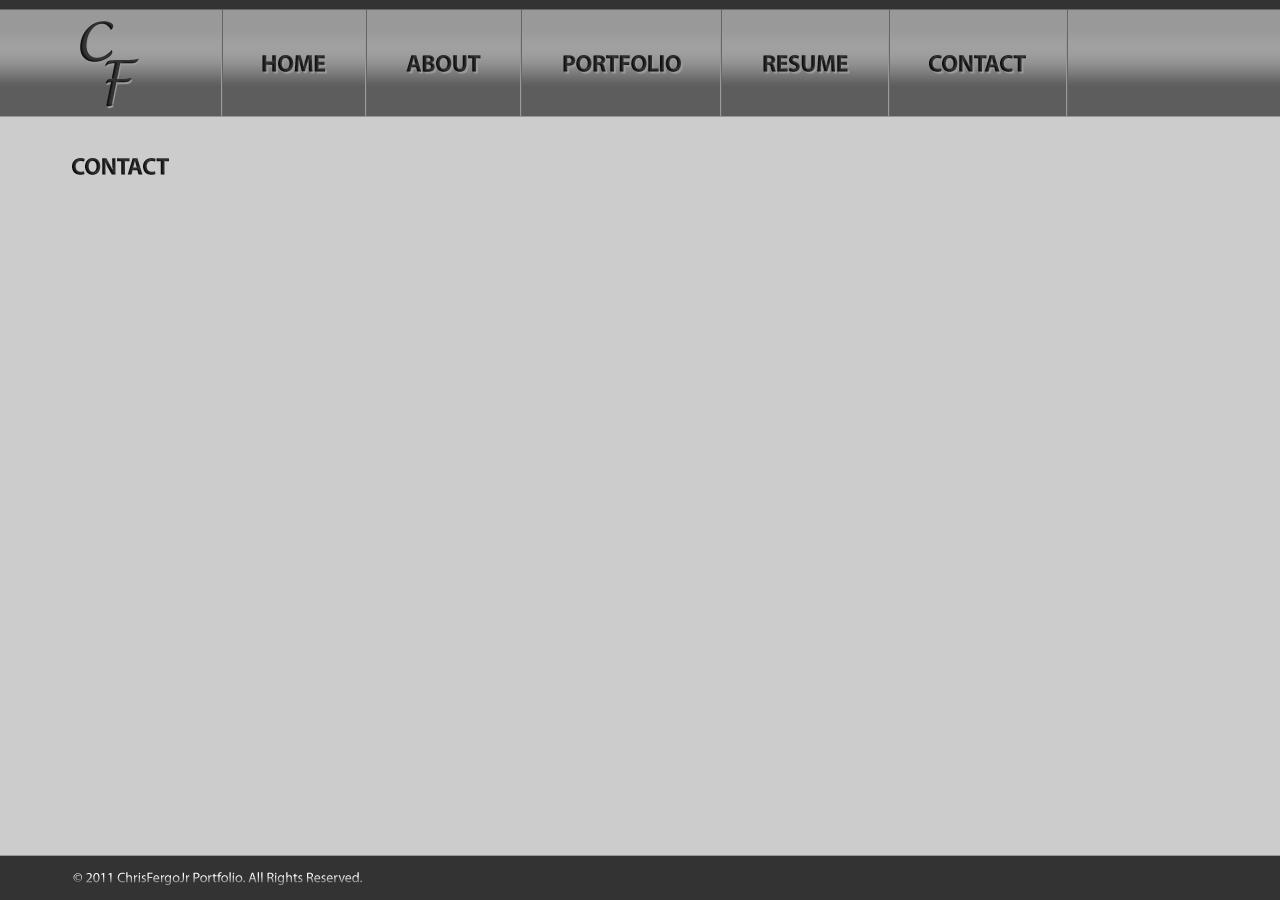
<style>
.page{position:relative;width:1280px;height:900px;background:#cccccc}
.page>*{position:absolute;margin:0}
.t1{font:24px "MyriadPro-Bold";letter-spacing:-0.025em;color:#232323}
.t2{font:24px "MyriadPro-Bold";letter-spacing:-0.025em;color:#242424}
.t3{font:24px "MyriadPro-Bold";letter-spacing:-0.025em;color:#252525}
.t4{font:14px "MyriadPro-Regular"}
</style>
<div class="page">
<p class="t1" style="left:262px;top:55px;width:63px;height:17px">HOME</p>
<p class="t2" style="left:406px;top:55px;width:75px;height:17px">ABOUT</p>
<p class="t2" style="left:563px;top:55px;width:118px;height:17px">PORTFOLIO</p>
<p class="t3" style="left:763px;top:55px;width:85px;height:17px">RESUME</p>
<p class="t1" style="left:929px;top:55px;width:97px;height:17px">CONTACT</p>
<p class="t1" style="left:72px;top:158px;width:97px;height:17px">CONTACT</p>
<p class="t4" style="left:73px;top:872px;width:289px;height:13px">© 2011 ChrisFergoJr Portfolio. All Rights Reserved.</p>
</div>
